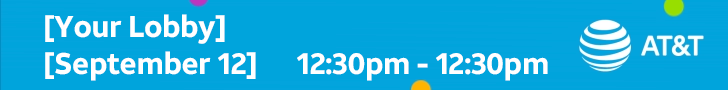
<style>
.page{position:relative;width:728px;height:90px;background:#00a4dc}
.page>*{position:absolute;margin:0}
.t1{font:29.9px/37.9px "ATTAleckSans_Bold";letter-spacing:-0.014em;color:#ffffff}
</style>
<div class="page">
<p class="t1" style="left:45px;top:14px;width:503px;height:67px">[Your Lobby]<br>[September 12]      12:30pm - 12:30pm</p>
</div>
